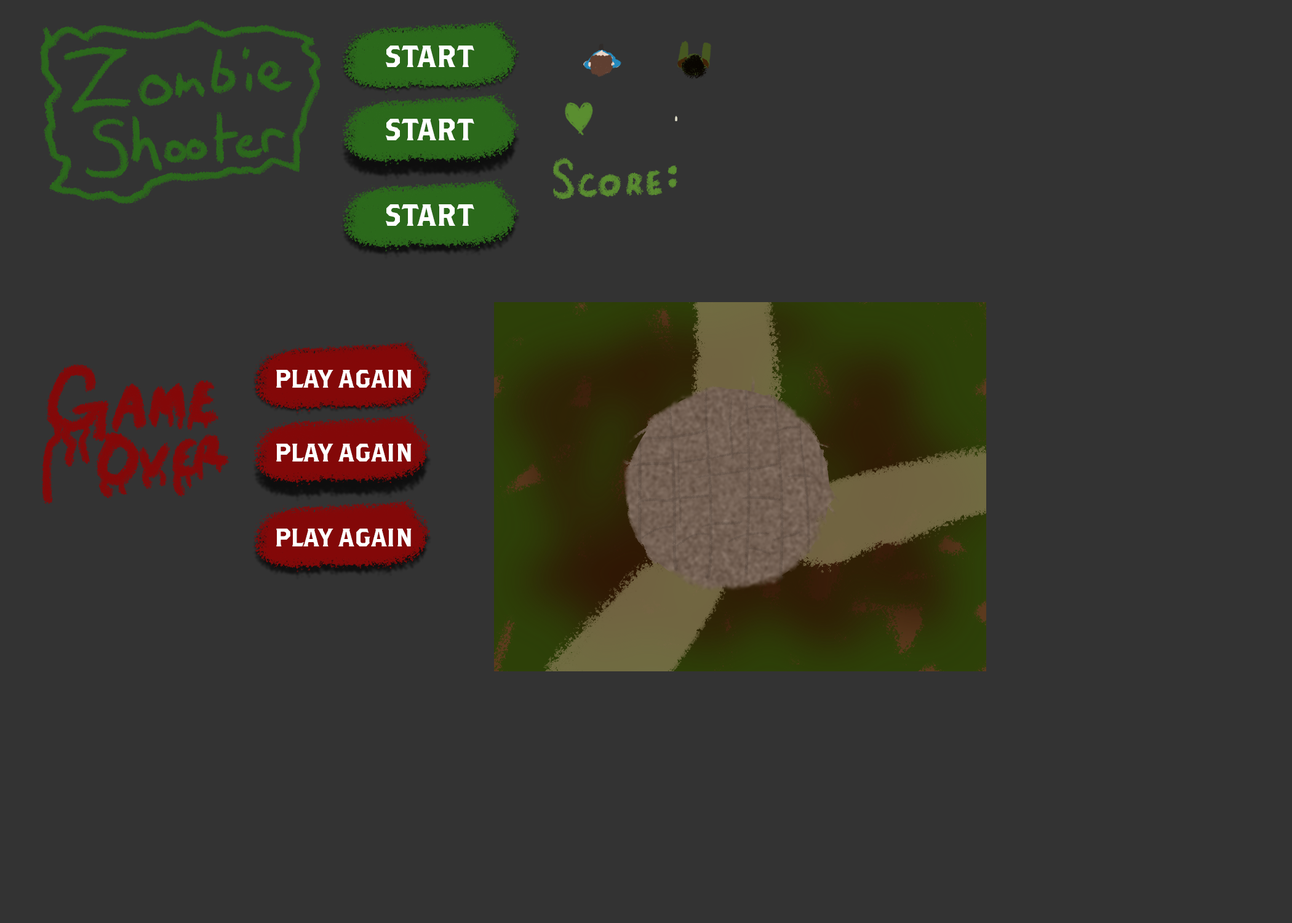
<style>
.page{position:relative;width:1292px;height:923px;background:#333333}
.page>*{position:absolute;margin:0}
.t1{font:30.8px "BrothersOT-Regular";color:#ffffff}
.t2{font:25.6px "BrothersOT-Regular";color:#ffffff}
</style>
<div class="page">
<p class="t1" style="left:386px;top:46px;width:88px;height:21px">START</p>
<p class="t1" style="left:386px;top:119px;width:88px;height:21px">START</p>
<p class="t1" style="left:386px;top:204px;width:88px;height:22px">START</p>
<p class="t2" style="left:276px;top:370px;width:136px;height:18px">PLAY AGAIN</p>
<p class="t2" style="left:276px;top:444px;width:136px;height:17px">PLAY AGAIN</p>
<p class="t2" style="left:276px;top:529px;width:136px;height:17px">PLAY AGAIN</p>
</div>
